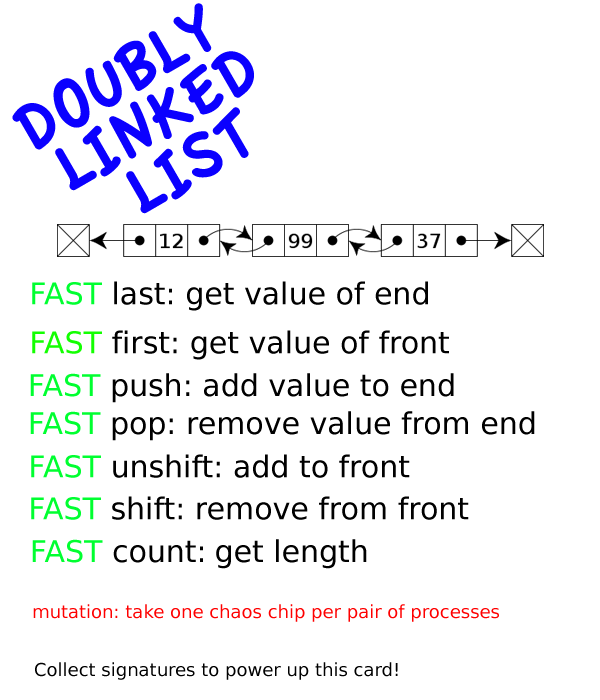
<style>
.page{position:relative;width:600px;height:700px;background:#ffffff}
.page>*{position:absolute;margin:0}
.t1{font:72px "AppleCasual";color:#0c00ff}
.t2{font:30px "BitstreamVeraSans-Roman";color:#000000}
.t3{font:30px "BitstreamVeraSans-Roman";color:#00ff30}
.t4{font:30px "BitstreamVeraSans-Roman";color:#13ff01}
.t5{font:18px "BitstreamVeraSans-Roman";color:#fe0101}
.t6{font:18px "BitstreamVeraSans-Roman";color:#000000}
</style>
<div class="page">
<p class="t1" style="left:12px;top:3px;width:200px;height:147px;rotate:-30deg">DOUBLY</p>
<p class="t1" style="left:55px;top:51px;width:199px;height:140px;rotate:-30deg">LINKED</p>
<p class="t1" style="left:126px;top:107px;width:123px;height:107px;rotate:-30deg">LIST</p>
<p class="t2" style="left:32px;top:281px;width:396px;height:30px"><span class="t3">FAST </span>last: get value of end</p>
<p class="t2" style="left:32px;top:330px;width:417px;height:30px"><span class="t4">FAST </span>first: get value of front</p>
<p class="t2" style="left:30px;top:373px;width:424px;height:30px"><span class="t3">FAST </span>push: add value to end</p>
<p class="t2" style="left:30px;top:411px;width:505px;height:30px"><span class="t3">FAST </span>pop: remove value from end</p>
<p class="t2" style="left:31px;top:454px;width:379px;height:24px"><span class="t3">FAST </span>unshift: add to front</p>
<p class="t2" style="left:31px;top:496px;width:438px;height:24px"><span class="t3">FAST </span>shift: remove from front</p>
<p class="t2" style="left:32px;top:539px;width:335px;height:30px"><span class="t3">FAST </span>count: get length</p>
<p class="t5" style="left:33px;top:604px;width:466px;height:18px">mutation: take one chaos chip per pair of processes</p>
<p class="t6" style="left:35px;top:662px;width:363px;height:18px">Collect signatures to power up this card!</p>
</div>
